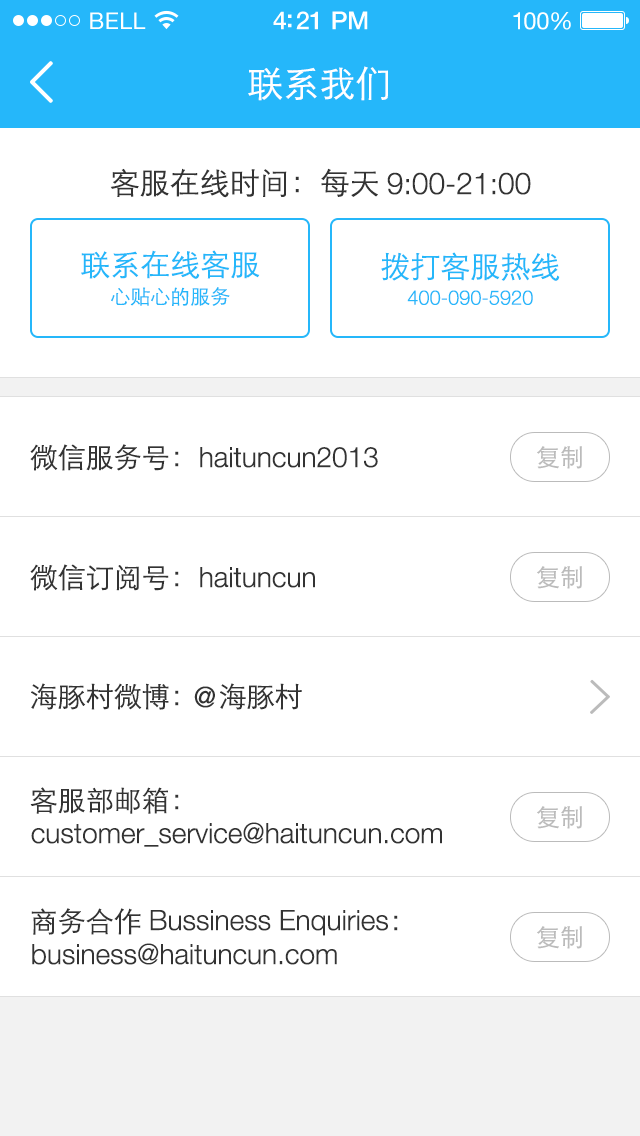
<style>
.page{position:relative;width:640px;height:1136px;background:#ffffff}
.page>*{position:absolute;margin:0}
.t1{font:36px "STXihei";color:#ffffff}
.t2{font:30px "STXihei";color:#333333}
.t3{font:30px "HelveticaNeueLTPro-Lt";color:#333333}
.t4{font:30px "STXihei";color:#25b7fa}
.t5{font:20px "STXihei";color:#25b7fa}
.t6{font:20px "HelveticaNeueLTPro-Lt";color:#25b7fa}
.t7{font:28px "STXihei";color:#333333}
.t8{font:28px "HelveticaNeueLTPro-Lt";color:#333333}
.t9{font:24px "STXihei";color:#bbbbbb}
.t10{font:28px "HelveticaNeueLTPro-Roman";color:#333333}
</style>
<div class="page">
<p class="t1" style="left:248px;top:66px;width:140px;height:35px">联系我们</p>
<p class="t2" style="left:110px;top:168px;width:268px;height:30px">客服在线时间：每天</p>
<p class="t3" style="left:387px;top:172px;width:144px;height:23px">9:00-21:00</p>
<p class="t4" style="left:81px;top:250px;width:179px;height:29px">联系在线客服</p>
<p class="t4" style="left:381px;top:252px;width:179px;height:29px">拨打客服热线</p>
<p class="t5" style="left:111px;top:287px;width:119px;height:19px">心贴心的服务</p>
<p class="t6" style="left:407px;top:290px;width:126px;height:15px">400-090-5920</p>
<p class="t7" style="left:30px;top:444px;width:149px;height:27px">微信服务号：</p>
<p class="t8" style="left:200px;top:447px;width:178px;height:21px">haituncun2013</p>
<p class="t9" style="left:537px;top:446px;width:45px;height:23px">复制</p>
<p class="t7" style="left:30px;top:564px;width:149px;height:27px">微信订阅号：</p>
<p class="t8" style="left:200px;top:567px;width:115px;height:21px">haituncun</p>
<p class="t9" style="left:537px;top:566px;width:45px;height:23px">复制</p>
<p class="t7" style="left:31px;top:683px;width:271px;height:27px">海豚村微博：   海豚村</p>
<p class="t10" style="left:194px;top:686px;width:21px;height:22px">@</p>
<p class="t7" style="left:30px;top:787px;width:149px;height:27px">客服部邮箱：</p>
<p class="t9" style="left:537px;top:806px;width:45px;height:23px">复制</p>
<p class="t8" style="left:31px;top:822px;width:411px;height:25px">customer_service@haituncun.com</p>
<p class="t8" style="left:31px;top:908px;width:367px;height:28px"><span class="t7">商务合作 </span>Bussiness Enquiries<span class="t7">：</span></p>
<p class="t9" style="left:537px;top:926px;width:45px;height:23px">复制</p>
<p class="t8" style="left:32px;top:943px;width:305px;height:22px">business@haituncun.com</p>
</div>
